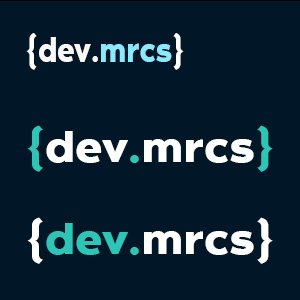
<style>
.page{position:relative;width:300px;height:300px;background:#011627}
.page>*{position:absolute;margin:0}
.t1{font:35.1px "NoirStd-SemiBold";color:#f9f9f9;scale:0.88 1}
.t2{font:35.1px "NoirStd-SemiBold";color:#ffffff;scale:0.88 1}
.t3{font:35.1px "NoirStd-SemiBold";color:#8be9fd;scale:0.88 1}
.t4{font:43.9px "NoirStd-SemiBold";color:#ffffff;scale:1.09 1}
.t5{font:43.9px "NoirStd-SemiBold";color:#2ec4b6;scale:1.09 1}
</style>
<div class="page">
<p class="t1" style="left:26px;top:33px;width:158px;height:37px"><span class="t2">{</span>dev.<span class="t3">mrcs</span><span class="t2">}</span></p>
<p class="t4" style="left:27px;top:125px;width:246px;height:47px"><span class="t5">{</span>dev<span class="t5">.</span>mrcs<span class="t5">}</span></p>
<p class="t4" style="left:27px;top:217px;width:246px;height:47px">{<span class="t5">dev.</span>mrcs}</p>
</div>
